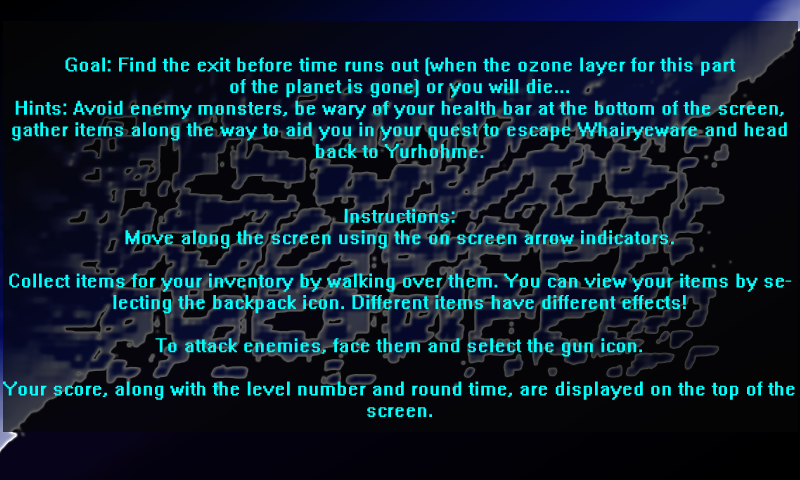
<style>
.page{position:relative;width:800px;height:480px}
.page>*{position:absolute;margin:0}
.t1{font:18px "System";color:#02fefb}
.t2{font:18px "System";color:#f7061f}
</style>
<div class="page">
<p class="t1" style="left:3px;top:57px;width:792px;height:360px;text-align:center"><span class="t2"><br><br></span>Goal: Find the exit before time runs out (when the ozone layer for this part <br>of the planet is gone) or you will die...<br>Hints: Avoid enemy monsters, be wary of your health bar at the bottom of the screen, gather items along the way to aid you in your quest to escape Whairyeware and head back to Yurhohme.<br><br><br>Instructions:<br>Move along the screen using the on screen arrow indicators.<br><br>Collect items for your inventory by walking over them. You can view your items by selecting the backpack icon. Different items have different effects!<br><br>To attack enemies, face them and select the gun icon.<br><br>Your score, along with the level number and round time, are displayed on the top of the screen.</p>
</div>
